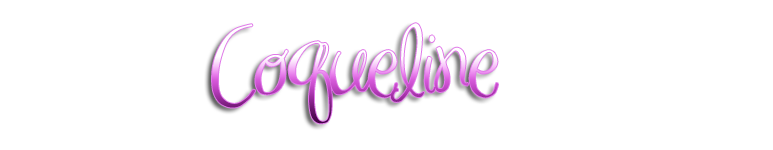
<style>
.page{position:relative;width:773px;height:150px;background:#ffffff}
.page>*{position:absolute;margin:0}
.t1{font:72px "MASexy"}
</style>
<div class="page">
<p class="t1" style="left:212px;top:23px;width:286px;height:101px">Coqueline</p>
</div>
